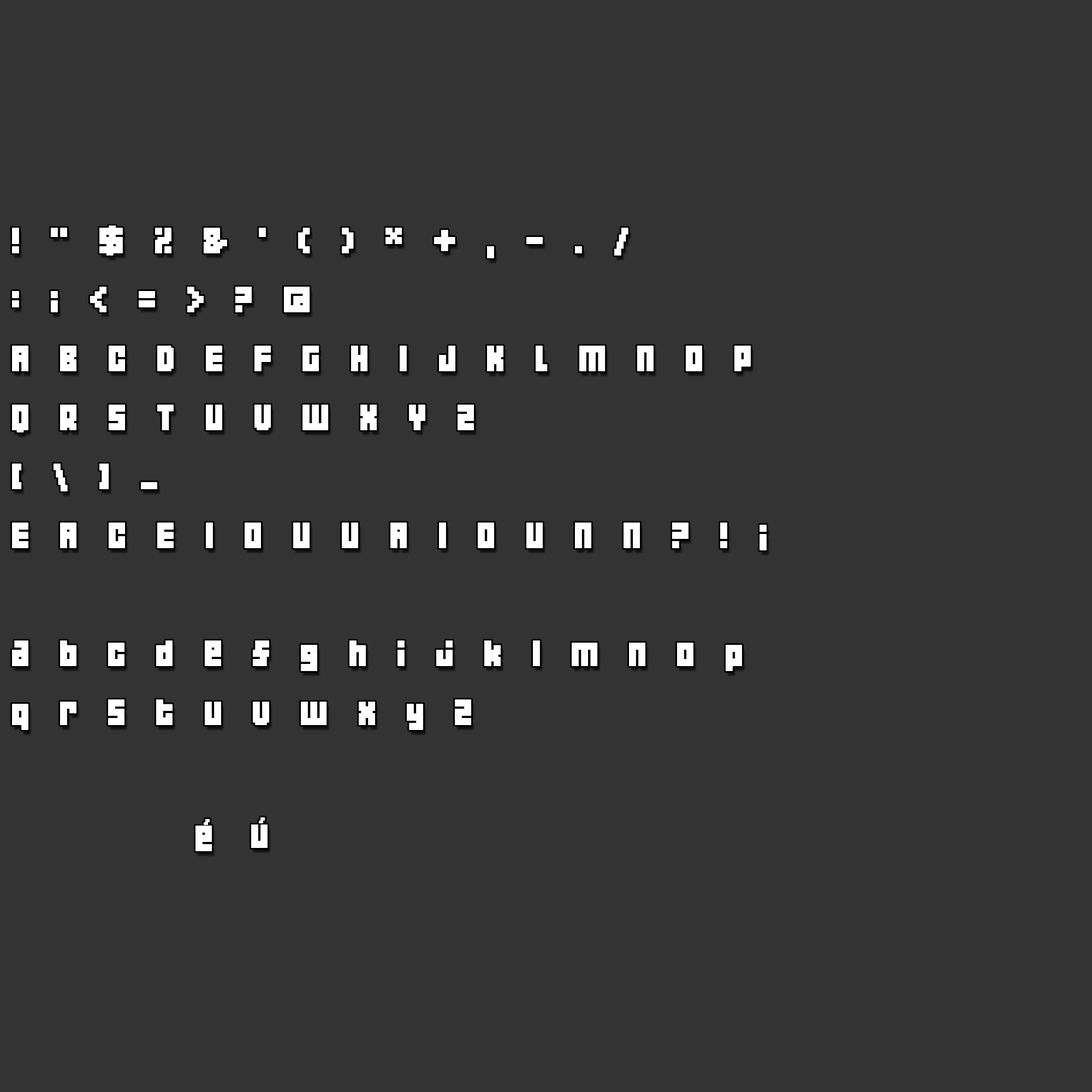
<style>
.page{position:relative;width:1092px;height:1092px;background:#333333}
.page>*{position:absolute;margin:0}
.t1{font:32.8px/59px "04b19";letter-spacing:0.24em;color:#ffffff}
.t2{font:32.8px/59px "04b19";letter-spacing:0.9em;color:#ffffff}
</style>
<div class="page">
<p class="t1" style="left:12px;top:225px;width:739px;height:505px">! " $ % &amp; ' ( ) * + , - . /<br>: ; &lt; = &gt; ? @<br>A B C D E F G H I J K L M N O P Q R S T U V W X Y Z <br>[ \ ] _ <br>E A C E I O U U A I O U N N ? !<br><br><span class="t2">abcdefghijklmnopqrstuvwxyz</span></p>
</div>
